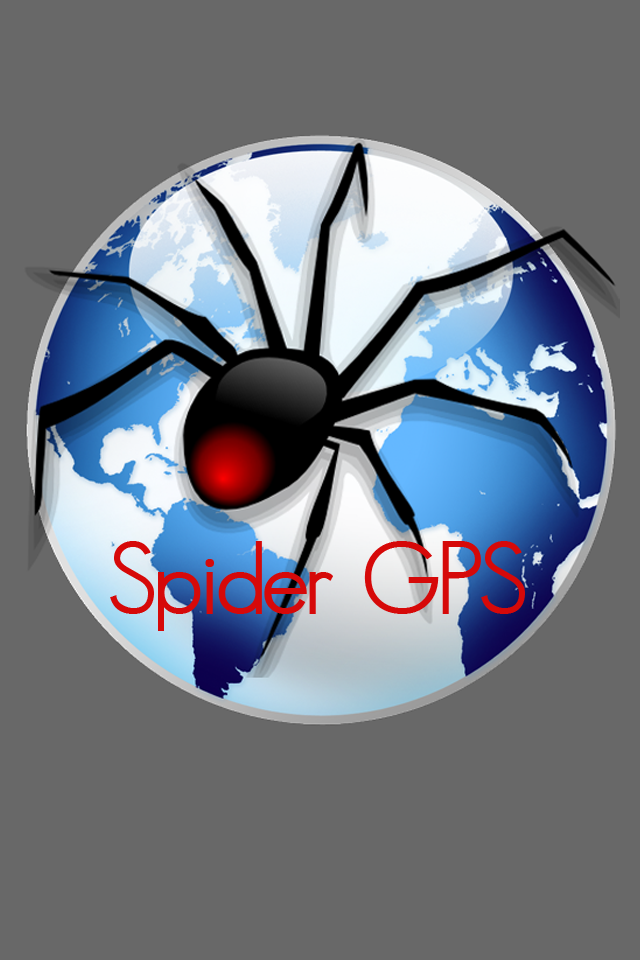
<style>
.page{position:relative;width:640px;height:960px;background:#686868}
.page>*{position:absolute;margin:0}
.t1{font:100px "MAXIMOBold";color:#d60909}
</style>
<div class="page">
<p class="t1" style="left:110px;top:541px;width:415px;height:90px">Spider GPS</p>
</div>
